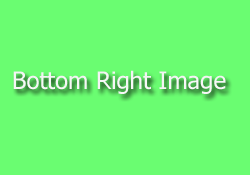
<style>
.page{position:relative;width:250px;height:175px;background:#6afd71}
.page>*{position:absolute;margin:0}
.t1{font:24px "Tahoma";color:#ffffff}
</style>
<div class="page">
<p class="t1" style="left:13px;top:70px;width:213px;height:24px">Bottom Right Image</p>
</div>
